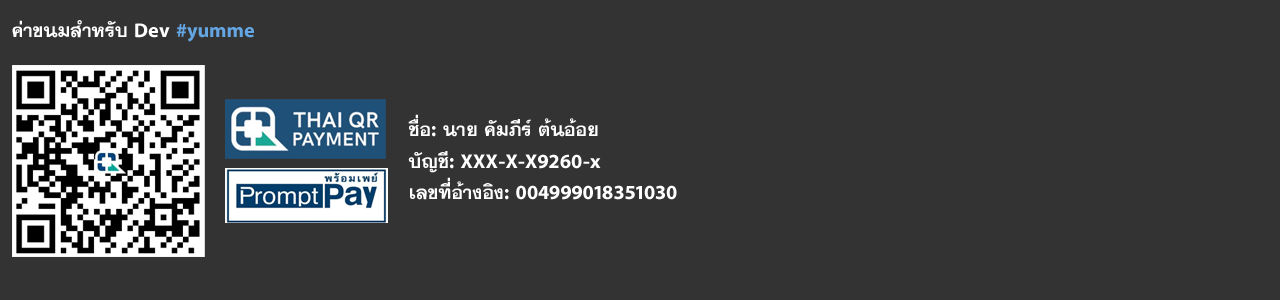
<style>
.page{position:relative;width:1280px;height:300px;background:#333333}
.page>*{position:absolute;margin:0}
.t1{font:26.4px "TFPhethai";color:#ffffff}
.t2{font:26.4px "TFPhethai";color:#64a6e4}
</style>
<div class="page">
<p class="t1" style="left:12px;top:20px;width:242px;height:22px">ค่าขนมสำหรับ Dev <span class="t2">#yumme</span></p>
<p class="t1" style="left:408px;top:114px;width:269px;height:86px">ชื่อ: นาย คัมภีร์ ต้นอ้อย<br>บัญชี: XXX-X-X9260-x <br>เลขที่อ้างอิง: 004999018351030</p>
</div>
